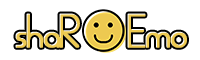
<style>
.page{position:relative;width:200px;height:60px;background:#ffffff}
.page>*{position:absolute;margin:0}
.t1{font:48px "ALDORARegular";letter-spacing:-0.1em;color:#edc951;font-weight:bold}
</style>
<div class="page">
<p class="t1" style="left:16px;top:14px;width:172px;height:35px">shaR     Emo</p>
</div>
